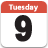
<style>
.page{position:relative;width:48px;height:48px;background:#ffffff}
.page>*{position:absolute;margin:0}
.t1{font:6.8px "MicrosoftYaHei-Bold";color:#ffffff;font-weight:bold}
.t2{font:33.8px "Arial-BoldMT";color:#221e1f;font-weight:bold}
</style>
<div class="page">
<p class="t1" style="left:8px;top:4px;width:30px;height:8px">Tuesday</p>
<p class="t2" style="left:14px;top:15px;width:18px;height:27px">9</p>
</div>
